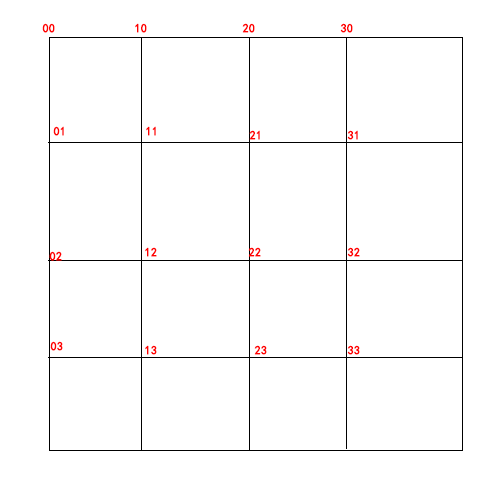
<style>
.page{position:relative;width:500px;height:500px;background:#ffffff}
.page>*{position:absolute;margin:0}
.t1{font:12px "SimHei";color:#ff0000;font-weight:bold}
</style>
<div class="page">
<p class="t1" style="left:42px;top:23px;width:13px;height:10px">00</p>
<p class="t1" style="left:135px;top:23px;width:12px;height:10px">10</p>
<p class="t1" style="left:242px;top:23px;width:13px;height:10px">20</p>
<p class="t1" style="left:340px;top:23px;width:13px;height:10px">30</p>
<p class="t1" style="left:53px;top:126px;width:11px;height:10px">01</p>
<p class="t1" style="left:146px;top:126px;width:10px;height:10px">11</p>
<p class="t1" style="left:249px;top:130px;width:11px;height:10px">21</p>
<p class="t1" style="left:347px;top:130px;width:11px;height:10px">31</p>
<p class="t1" style="left:49px;top:251px;width:13px;height:10px">02</p>
<p class="t1" style="left:145px;top:247px;width:12px;height:10px">12</p>
<p class="t1" style="left:248px;top:247px;width:13px;height:10px">22</p>
<p class="t1" style="left:347px;top:247px;width:13px;height:10px">32</p>
<p class="t1" style="left:50px;top:341px;width:13px;height:10px">03</p>
<p class="t1" style="left:145px;top:345px;width:12px;height:10px">13</p>
<p class="t1" style="left:254px;top:345px;width:13px;height:10px">23</p>
<p class="t1" style="left:347px;top:345px;width:13px;height:10px">33</p>
</div>
